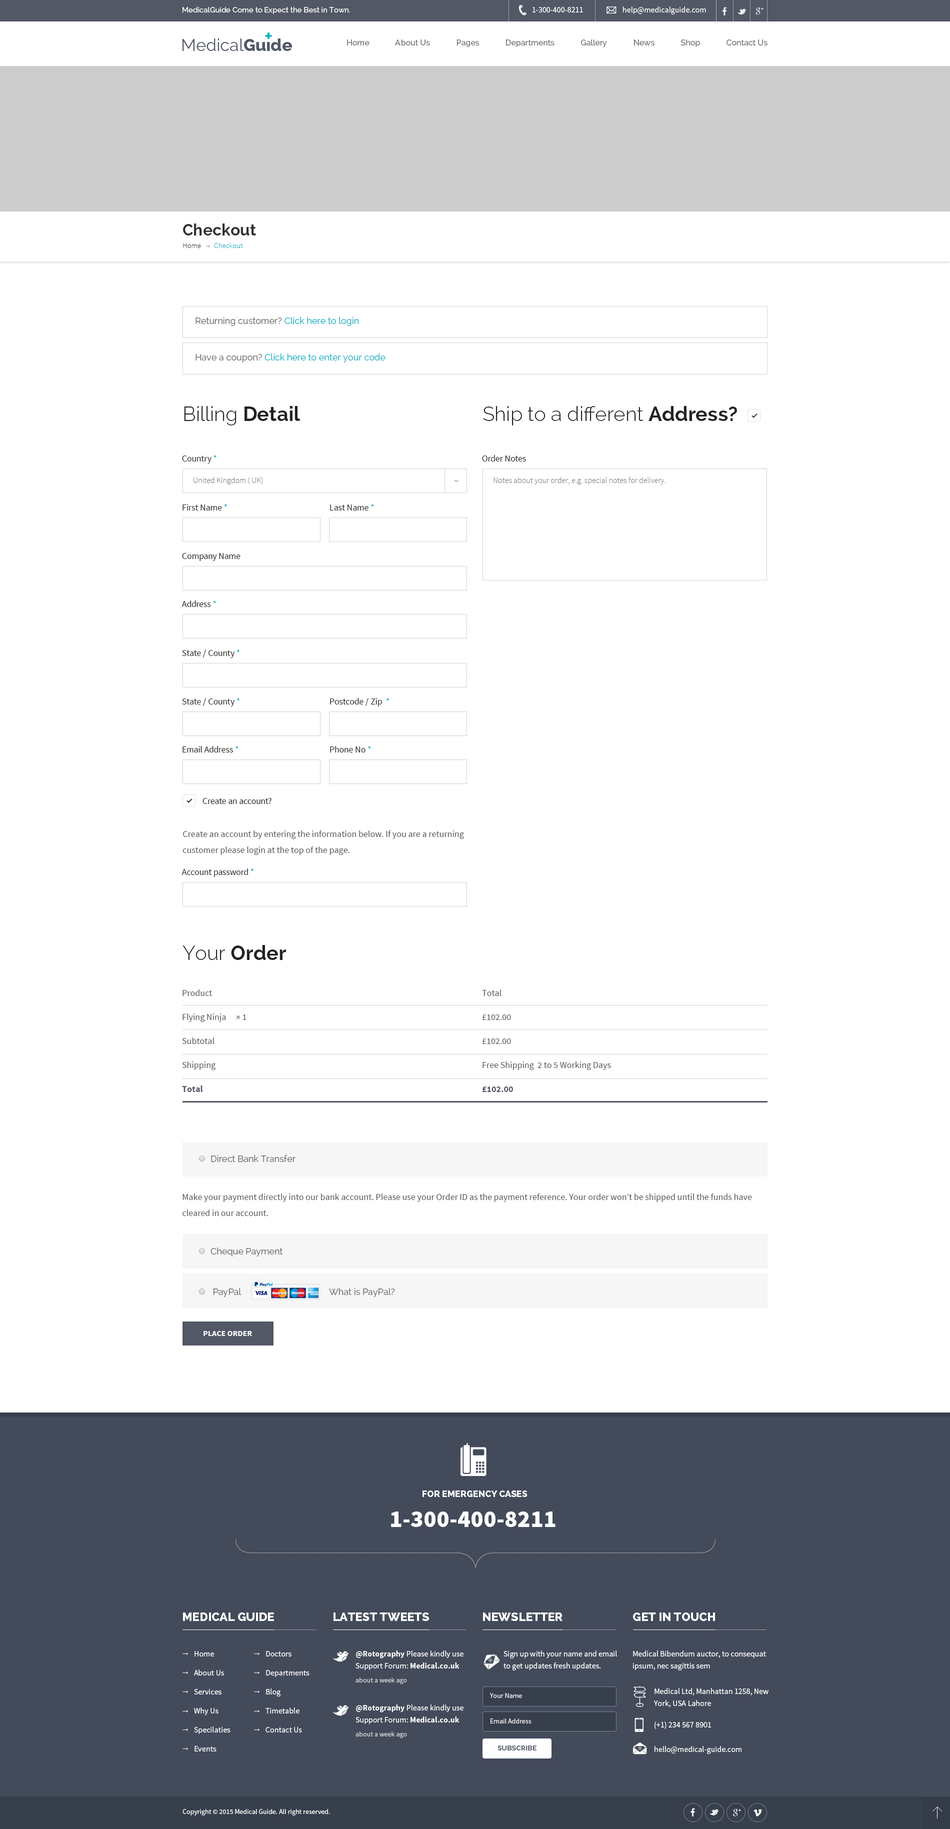
<style>
.page{position:relative;width:950px;height:1829px;background:#ffffff}
.page>*{position:absolute;margin:0}
.t1{font:7.5px "Raleway-Medium";color:#ffffff}
.t2{font:8px "SourceSansPro-Regular";color:#ffffff}
.t3{font:10.1px "invent-communication";color:#ffffff}
.t4{font:8px "Raleway-Medium";color:#707070}
.t5{font:16px "Raleway-Bold";color:#323232}
.t6{font:7.5px "SourceSansPro-Light";color:#333333}
.t7{font:7.5px "SourceSansPro-Light";color:#02adc6}
.t8{font:9px "Raleway-Regular";color:#636363}
.t9{font:9px "Raleway-Regular";color:#02adc6}
.t10{font:20px "Raleway-Light";color:#222222}
.t11{font:20px "Raleway-Bold";color:#222222}
.t12{font:9px "SourceSansPro-Regular";color:#222222}
.t13{font:9px "SourceSansPro-Regular";color:#02adc6}
.t14{font:8px "SourceSansPro-Light";color:#797979}
.t15{font:9px/16px "SourceSansPro-Regular";color:#555555}
.t16{font:9px/24px "SourceSansPro-Regular";color:#555555}
.t17{font:9px/24px "SourceSansPro-Bold";color:#525866}
.t18{font:8px "SourceSansPro-Bold";color:#ffffff;text-transform:uppercase}
.t19{font:35.1px "invent-communication";color:#ffffff}
.t20{font:9px "Raleway-ExtraBold";color:#ffffff;text-transform:uppercase}
.t21{font:24px "SourceSansPro-Black";color:#ffffff}
.t22{font:12px "Raleway-ExtraBold";color:#ffffff;text-transform:uppercase}
.t23{font:8px/19px "SourceSansPro-Regular";color:#ffffff}
.t24{font:8px/12px "SourceSansPro-Regular";color:#ffffff}
.t25{font:8px/12px "SourceSansPro-Bold";color:#ffffff}
.t26{font:7px "SourceSansPro-Regular";color:#d3d4d7}
.t27{font:7px "SourceSansPro-Regular";color:#ffffff}
.t28{font:7px "Raleway-Bold";color:#525866;text-transform:uppercase}
</style>
<div class="page">
<p class="t1" style="left:182px;top:7px;width:168px;height:7px">MedicalGuide Come to Expect the Best in Town.</p>
<p class="t2" style="left:532px;top:7px;width:51px;height:5px">1-300-400-8211</p>
<p class="t3" style="left:606px;top:6px;width:10px;height:7px">(</p>
<p class="t2" style="left:623px;top:6px;width:83px;height:8px">help@medicalguide.com</p>
<p class="t4" style="left:347px;top:39px;width:420px;height:8px">Home             About Us             Pages             Departments             Gallery             News             Shop             Contact Us</p>
<p class="t5" style="left:183px;top:223px;width:73px;height:12px">Checkout</p>
<p class="t6" style="left:183px;top:243px;width:18px;height:5px">Home</p>
<p class="t7" style="left:214px;top:242px;width:29px;height:6px">Checkout</p>
<p class="t8" style="left:195px;top:317px;width:163px;height:9px">Returning customer? <span class="t9">Click here to login</span></p>
<p class="t9" style="left:195px;top:353px;width:190px;height:9px"><span class="t8">Have a coupon? </span>Click here to enter your code</p>
<p class="t10" style="left:184px;top:406px;width:116px;height:19px">Billing <span class="t11">Detail</span></p>
<p class="t10" style="left:483px;top:406px;width:254px;height:19px">Ship to a different <span class="t11">Address?</span></p>
<p class="t12" style="left:182px;top:455px;width:34px;height:8px">Country <span class="t13">*</span></p>
<p class="t12" style="left:482px;top:455px;width:44px;height:6px">Order Notes</p>
<p class="t14" style="left:193px;top:477px;width:70px;height:7px">United Kingdom ( UK)</p>
<p class="t14" style="left:493px;top:477px;width:173px;height:7px">Notes about your order, e.g. special notes for delivery.</p>
<p class="t12" style="left:182px;top:504px;width:45px;height:6px">First Name <span class="t13">*</span></p>
<p class="t12" style="left:330px;top:504px;width:44px;height:6px">Last Name <span class="t13">*</span></p>
<p class="t12" style="left:182px;top:553px;width:58px;height:8px">Company Name</p>
<p class="t12" style="left:181px;top:600px;width:35px;height:7px">Address <span class="t13">*</span></p>
<p class="t12" style="left:182px;top:649px;width:58px;height:9px">State / County <span class="t13">*</span></p>
<p class="t12" style="left:182px;top:698px;width:58px;height:8px">State / County <span class="t13">*</span></p>
<p class="t12" style="left:330px;top:698px;width:59px;height:8px">Postcode / Zip  <span class="t13">*</span></p>
<p class="t12" style="left:182px;top:746px;width:56px;height:6px">Email Address <span class="t13">*</span></p>
<p class="t12" style="left:330px;top:746px;width:41px;height:6px">Phone No <span class="t13">*</span></p>
<p class="t12" style="left:202px;top:798px;width:69px;height:6px">Create an account?</p>
<p class="t15" style="left:183px;top:830px;width:281px;height:25px">Create an account by entering the information below. If you are a returning customer please login at the top of the page.</p>
<p class="t12" style="left:181px;top:868px;width:73px;height:9px">Account password <span class="t13">*</span></p>
<p class="t11" style="left:182px;top:945px;width:104px;height:15px"><span class="t10">Your </span>Order</p>
<p class="t16" style="left:182px;top:989px;width:64px;height:103px">Product<br>Flying Ninja  × 1<br>Subtotal<br>Shipping<br><span class="t17">Total</span></p>
<p class="t16" style="left:482px;top:989px;width:129px;height:103px">Total<br>£102.00<br>£102.00<br>Free Shipping  2 to 5 Working Days<br><span class="t17">£102.00</span></p>
<p class="t8" style="left:211px;top:1155px;width:84px;height:7px">Direct Bank Transfer</p>
<p class="t15" style="left:182px;top:1193px;width:570px;height:23px">Make your payment directly into our bank account. Please use your Order ID as the payment reference. Your order won’t be shipped until the funds have cleared in our account.</p>
<p class="t8" style="left:210px;top:1247px;width:73px;height:9px">Cheque Payment</p>
<p class="t8" style="left:213px;top:1288px;width:28px;height:9px">PayPal</p>
<p class="t8" style="left:329px;top:1288px;width:66px;height:9px">What is PayPal?</p>
<p class="t18" style="left:203px;top:1331px;width:49px;height:5px">Place Order</p>
<p class="t19" style="left:460px;top:1443px;width:26px;height:33px">0</p>
<p class="t20" style="left:422px;top:1490px;width:105px;height:7px">For emergency cases</p>
<p class="t21" style="left:391px;top:1511px;width:164px;height:16px">1-300-400-8211</p>
<p class="t22" style="left:183px;top:1612px;width:91px;height:9px">Medical guide</p>
<p class="t22" style="left:333px;top:1612px;width:96px;height:9px">LATEST TWEETS</p>
<p class="t22" style="left:483px;top:1612px;width:79px;height:9px">NEWSLETTER</p>
<p class="t22" style="left:633px;top:1612px;width:82px;height:9px">GET IN TOUCH</p>
<p class="t23" style="left:194px;top:1651px;width:36px;height:100px">Home<br>About Us<br>Services<br>Why Us<br>Specilaties<br>Events</p>
<p class="t23" style="left:265px;top:1651px;width:44px;height:81px">Doctors<br>Departments<br>Blog<br>Timetable<br>Contact Us</p>
<p class="t24" style="left:355px;top:1650px;width:108px;height:20px"><span class="t25">@Rotography</span> Please kindly use <br>Support Forum: <span class="t25">Medical.co.uk</span></p>
<p class="t24" style="left:503px;top:1650px;width:114px;height:20px">Sign up with your name and email<br>to get updates fresh updates.</p>
<p class="t24" style="left:633px;top:1650px;width:133px;height:20px">Medical Bibendum auctor, to consequat<br>ipsum, nec sagittis sem</p>
<p class="t26" style="left:355px;top:1677px;width:52px;height:7px">about a week ago</p>
<p class="t27" style="left:490px;top:1693px;width:32px;height:5px;opacity:0.9">Your Name</p>
<p class="t24" style="left:654px;top:1688px;width:114px;height:19px">Medical Ltd, Manhattan 1258, New<br>York, USA Lahore</p>
<p class="t24" style="left:355px;top:1704px;width:108px;height:20px"><span class="t25">@Rotography</span> Please kindly use <br>Support Forum: <span class="t25">Medical.co.uk</span></p>
<p class="t27" style="left:490px;top:1718px;width:41px;height:5px;opacity:0.9">Email Address</p>
<p class="t2" style="left:654px;top:1721px;width:57px;height:8px">(+1) 234 567 8901</p>
<p class="t26" style="left:355px;top:1731px;width:52px;height:7px">about a week ago</p>
<p class="t28" style="left:497px;top:1745px;width:39px;height:5px">subscribe</p>
<p class="t2" style="left:654px;top:1746px;width:87px;height:8px">hello@medical-guide.com</p>
<p class="t27" style="left:182px;top:1809px;width:148px;height:6px">Copyright © 2015 Medical Guide. All right reserved.</p>
</div>
